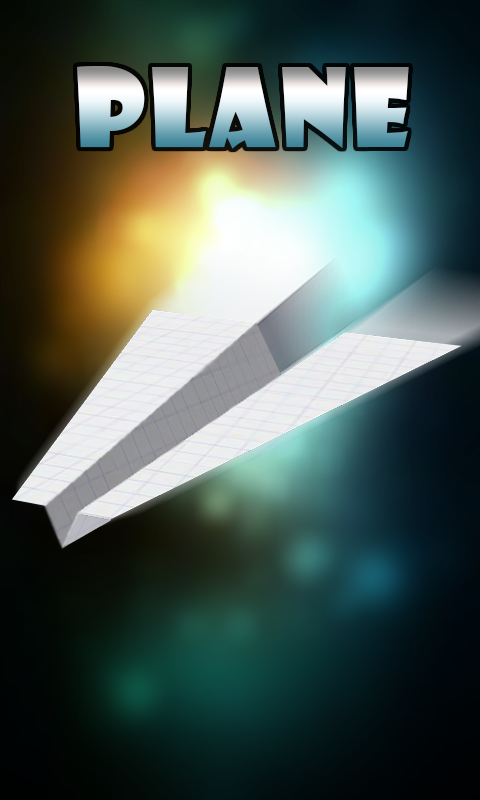
<style>
.page{position:relative;width:480px;height:800px}
.page>*{position:absolute;margin:0}
.t1{font:106px "ShowcardGothic-Reg";letter-spacing:0.04em}
</style>
<div class="page">
<p class="t1" style="left:77px;top:66px;width:332px;height:83px">PLANE</p>
</div>
